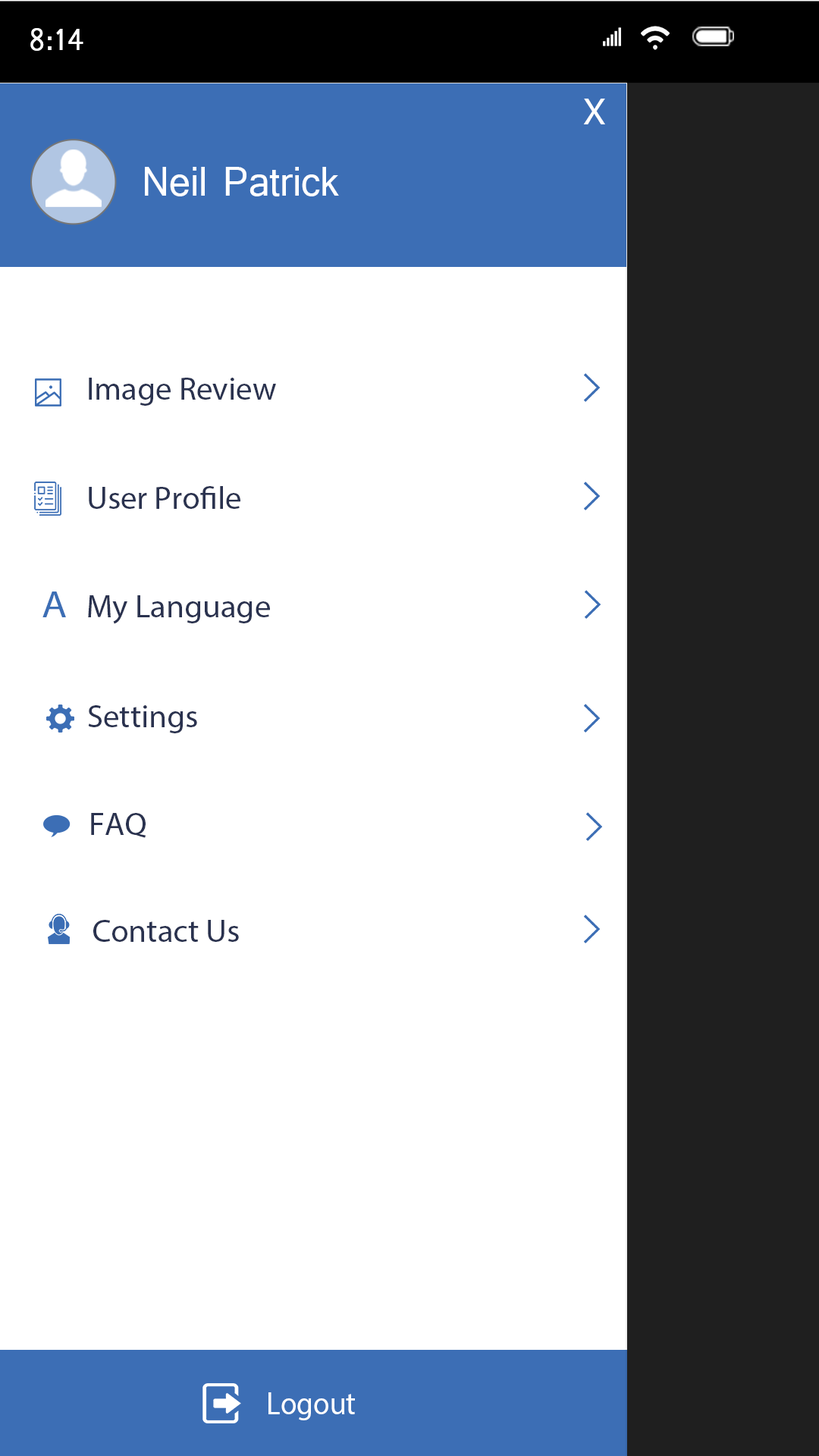
<style>
.page{position:relative;width:819px;height:1456px;background:#ffffff}
.page>*{position:absolute;margin:0}
.t1{font:32.7px "Shruti";color:#ffffff;scale:0.94 1}
.t2{font:37.5px "MyriadPro-Regular";color:#ffffff;scale:1.1 1}
.t3{font:43.6px "Shruti";color:#ffffff;scale:0.94 1}
.t4{font:31.6px "MyriadPro-Regular";color:#2a324f;scale:1.04 1}
.t5{font:37.5px "MyriadPro-Regular";color:#3c6eb5;scale:1.1 1}
.t6{font:31.6px "MyriadPro-Regular";color:#ffffff;scale:0.94 1}
</style>
<div class="page">
<p class="t1" style="left:30px;top:28px;width:53px;height:23px">8:14</p>
<p class="t2" style="left:583px;top:99px;width:22px;height:25px">X</p>
<p class="t3" style="left:145px;top:167px;width:194px;height:29px">Neil Patrick</p>
<p class="t4" style="left:89px;top:378px;width:187px;height:28px">Image Review</p>
<p class="t4" style="left:89px;top:486px;width:151px;height:23px">User Profile</p>
<p class="t5" style="left:42px;top:591px;width:24px;height:26px">A</p>
<p class="t4" style="left:88px;top:595px;width:182px;height:29px">My Language</p>
<p class="t4" style="left:88px;top:705px;width:109px;height:28px">Settings</p>
<p class="t4" style="left:91px;top:813px;width:55px;height:25px">FAQ</p>
<p class="t4" style="left:93px;top:920px;width:146px;height:22px">Contact Us</p>
<p class="t6" style="left:268px;top:1392px;width:87px;height:28px">Logout</p>
</div>
